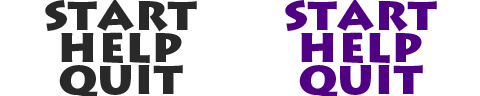
<style>
.page{position:relative;width:480px;height:96px;background:#ffffff}
.page>*{position:absolute;margin:0}
.t1{font:48px "LithosPro-Black";color:#292929}
.t2{font:48px "LithosPro-Black";color:#500083}
</style>
<div class="page">
<p class="t1" style="left:45px;top:0px;width:152px;height:32px">start</p>
<p class="t2" style="left:285px;top:0px;width:152px;height:32px">start</p>
<p class="t1" style="left:61px;top:32px;width:121px;height:31px">help</p>
<p class="t2" style="left:301px;top:32px;width:121px;height:31px">help</p>
</div>
